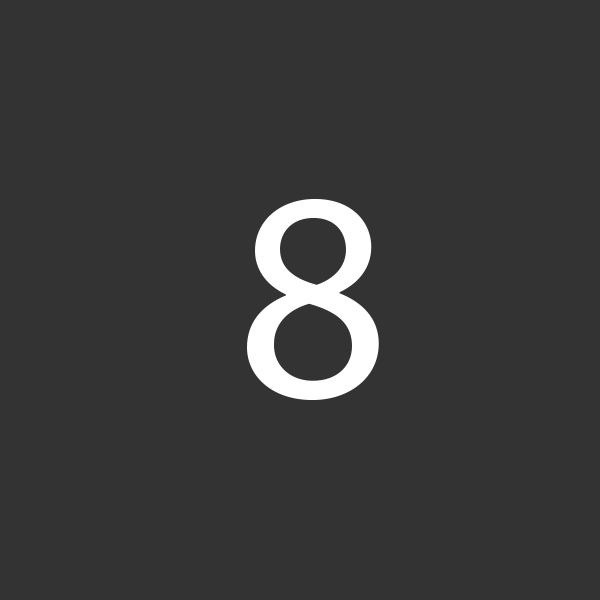
<style>
.page{position:relative;width:600px;height:600px;background:#333333}
.page>*{position:absolute;margin:0}
.t1{font:300px "MyriadPro-Regular";color:#ffffff}
</style>
<div class="page">
<p class="t1" style="left:247px;top:198px;width:132px;height:203px">8</p>
</div>
